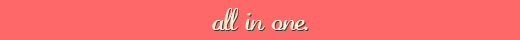
<style>
.page{position:relative;width:520px;height:40px;background:#ff6868}
.page>*{position:absolute;margin:0}
.t1{font:22px "LaurenScript";letter-spacing:-0.075em;color:#fff0d4}
.t2{font:22.4px "LaurenScript";letter-spacing:-0.075em}
</style>
<div class="page">
<p class="t1" style="left:212px;top:8px;width:96px;height:23px">all in one.</p>
<p class="t2" style="left:213px;top:9px;width:96px;height:23px">all in one.</p>
</div>
